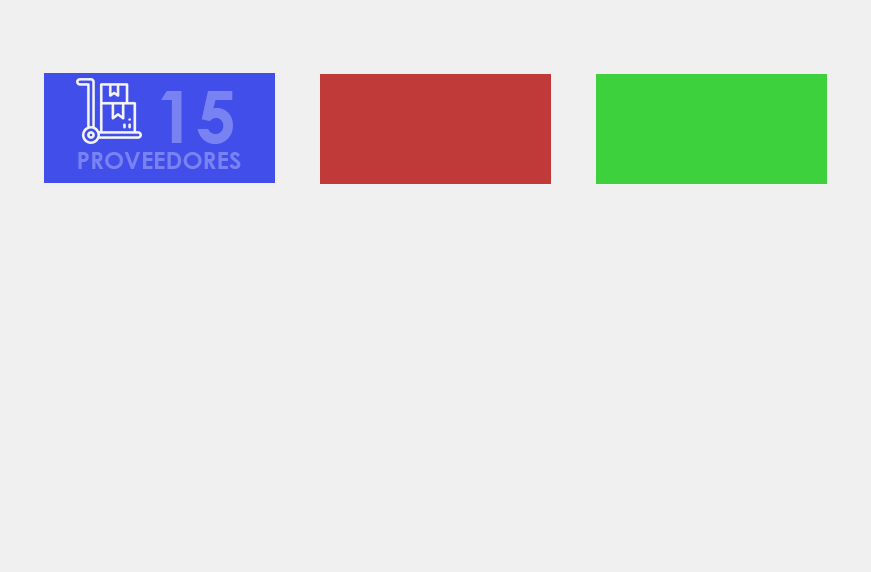
<style>
.page{position:relative;width:871px;height:572px;background:#f0f0f0}
.page>*{position:absolute;margin:0}
.t1{font:72px "CenturyGothic-Bold";color:#7982f3}
.t2{font:24px "CenturyGothic-Bold";color:#7982f3}
</style>
<div class="page">
<p class="t1" style="left:161px;top:91px;width:72px;height:53px">15</p>
<p class="t2" style="left:78px;top:152px;width:163px;height:17px">PROVEEDORES</p>
</div>
